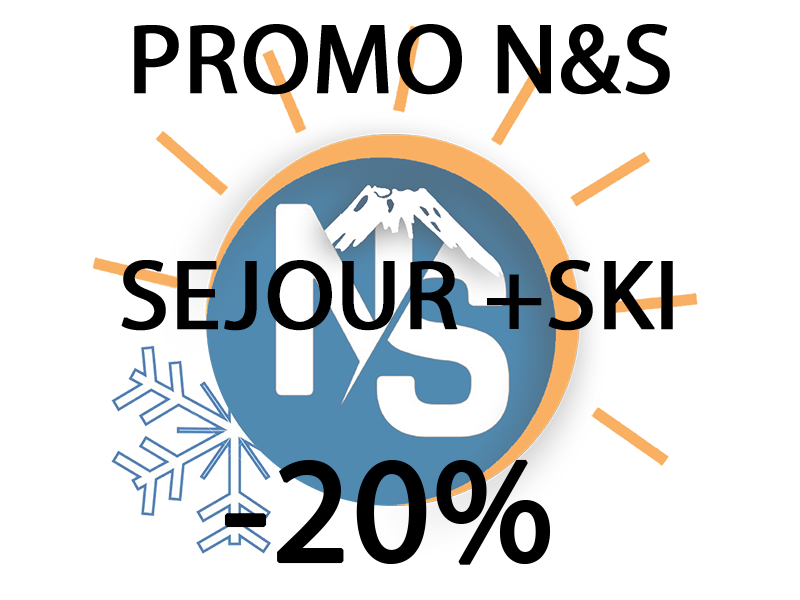
<style>
.page{position:relative;width:800px;height:600px;background:#ffffff}
.page>*{position:absolute;margin:0}
.t1{font:100px "MyriadPro-Regular";color:#000000;font-weight:bold}
.t2{font:150px "MyriadPro-Regular";color:#000000;font-weight:bold}
</style>
<div class="page">
<p class="t1" style="left:134px;top:24px;width:536px;height:71px">PROMO N&amp;S</p>
<p class="t1" style="left:121px;top:260px;width:552px;height:71px">SEJOUR +SKI</p>
<p class="t2" style="left:224px;top:459px;width:327px;height:106px">-20%</p>
</div>
